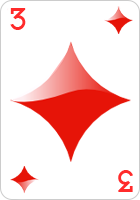
<style>
.page{position:relative;width:140px;height:200px;background:#ffffff}
.page>*{position:absolute;margin:0}
.t1{font:26px "CardCharacters";color:#ff2b2b}
</style>
<div class="page">
<p class="t1" style="left:10px;top:8px;width:16px;height:22px">3</p>
<p class="t1" style="left:118px;top:170px;width:15px;height:22px;rotate:180deg">3</p>
</div>
